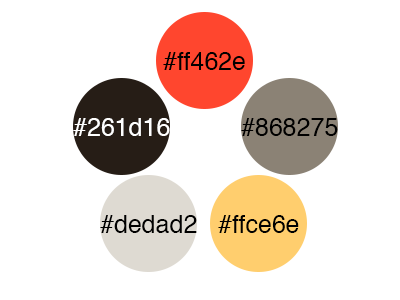
<style>
.page{position:relative;width:400px;height:300px;background:#ffffff}
.page>*{position:absolute;margin:0}
.t1{font:25px "Helvetica";color:#000000}
.t2{font:25px "Helvetica";color:#ffffff}
</style>
<div class="page">
<p class="t1" style="left:163px;top:52px;width:82px;height:18px">#ff462e</p>
<p class="t2" style="left:73px;top:118px;width:97px;height:18px">#261d16</p>
<p class="t1" style="left:241px;top:118px;width:97px;height:18px">#868275</p>
<p class="t1" style="left:100px;top:215px;width:97px;height:18px">#dedad2</p>
<p class="t1" style="left:218px;top:215px;width:81px;height:18px">#ffce6e</p>
</div>
